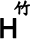
<style>
.page{position:relative;width:30px;height:39px;background:#ffffff}
.page>*{position:absolute;margin:0}
.t1{font:18px "DFKaiShu-SB-Estd-BF";color:#000000;font-weight:bold}
.t2{font:27px "ArialMT";color:#000000;font-weight:bold}
</style>
<div class="page">
<p class="t1" style="left:14px;top:0px;width:17px;height:16px">竹</p>
<p class="t2" style="left:0px;top:18px;width:17px;height:21px">H</p>
</div>
